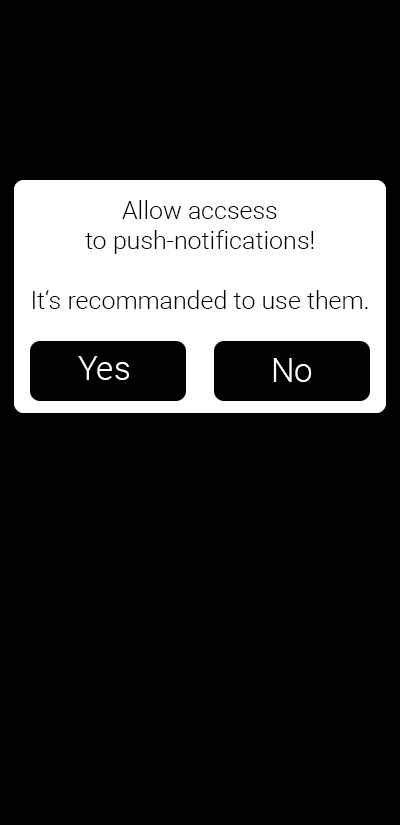
<style>
.page{position:relative;width:400px;height:825px;background:#000000}
.page>*{position:absolute;margin:0}
.t1{font:25px "Roboto-Light";color:#000000}
.t2{font:33.3px "Roboto-Light";color:#ffffff}
</style>
<div class="page">
<p class="t1" style="left:33px;top:200px;width:335px;height:109px;text-align:center">Allow accsess <br>to push-notifications!<br><br>It‘s recommanded to use them.</p>
<p class="t1" style="left:36px;top:200px;width:327px;height:114px;text-align:center">Allow accsess to gallery!<br><br>It‘s recommanded to use <br>gallery for a better experience.</p>
<p class="t2" style="left:78px;top:356px;width:51px;height:24px">Yes</p>
<p class="t2" style="left:78px;top:356px;width:51px;height:24px">Yes</p>
<p class="t2" style="left:273px;top:358px;width:39px;height:24px">No</p>
<p class="t2" style="left:273px;top:358px;width:39px;height:24px">No</p>
</div>
